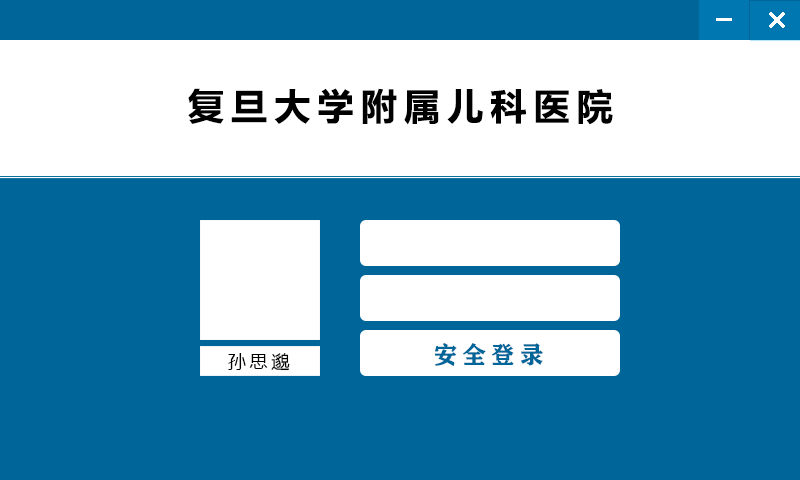
<style>
.page{position:relative;width:800px;height:480px;background:#006699}
.page>*{position:absolute;margin:0}
.t1{font:36px "MicrosoftYaHeiUI-Bold";letter-spacing:0.2em;color:#010000}
.t2{font:18px "MicrosoftYaHeiUI";letter-spacing:0.2em;color:#000000}
.t3{font:24px "FZCHSJW--GB1-0";letter-spacing:0.2em;color:#006699}
</style>
<div class="page">
<p class="t1" style="left:188px;top:88px;width:425px;height:37px">复旦大学附属儿科医院</p>
<p class="t2" style="left:228px;top:353px;width:62px;height:18px">孙思邈</p>
<p class="t3" style="left:434px;top:343px;width:109px;height:23px">安全登录</p>
</div>
